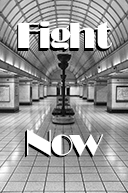
<style>
.page{position:relative;width:128px;height:193px}
.page>*{position:absolute;margin:0}
.t1{font:37.4px/35.4px "Broadway";letter-spacing:-0.06em;color:#ffffff}
</style>
<div class="page">
<p class="t1" style="left:17px;top:23px;width:94px;height:135px;text-align:center">Fight<br><br><br>Now</p>
<p class="t1" style="left:18px;top:21px;width:94px;height:136px;text-align:center">Fight<br><br><br>Now</p>
</div>
